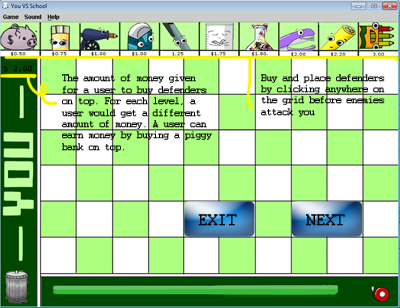
<style>
.page{position:relative;width:400px;height:308px;background:#ffffff}
.page>*{position:absolute;margin:0}
.t1{font:8.5px "Courier";color:#000000;font-weight:bold}
.t2{font:9.5px "Courier";color:#000000;font-weight:bold}
.t3{font:17.1px "Courier";color:#000000;font-weight:bold}
</style>
<div class="page">
<p class="t1" style="left:3px;top:66px;width:29px;height:7px">$ 2.00</p>
<p class="t2" style="left:62px;top:74px;width:150px;height:78px">The amount of money given for a user to buy defenders on top. For each level, a user would get a different amount of money. A user can earn money by buying a piggy bank on top.</p>
<p class="t2" style="left:261px;top:74px;width:124px;height:43px">Buy and place defenders by clicking anywhere on the grid before enemies attack you</p>
<p class="t3" style="left:198px;top:214px;width:39px;height:12px">EXIT</p>
<p class="t3" style="left:306px;top:214px;width:39px;height:12px">NEXT</p>
</div>
